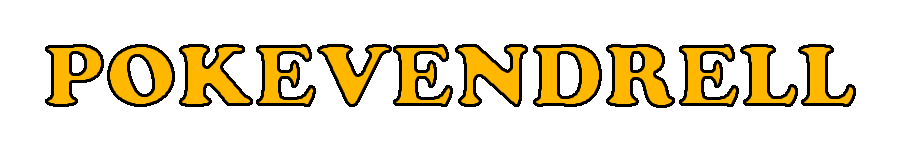
<style>
.page{position:relative;width:900px;height:150px;background:#ffffff}
.page>*{position:absolute;margin:0}
.t1{font:92px "CooperBlack"}
</style>
<div class="page">
<p class="t1" style="left:45px;top:44px;width:811px;height:64px">POKEVENDRELL</p>
</div>
